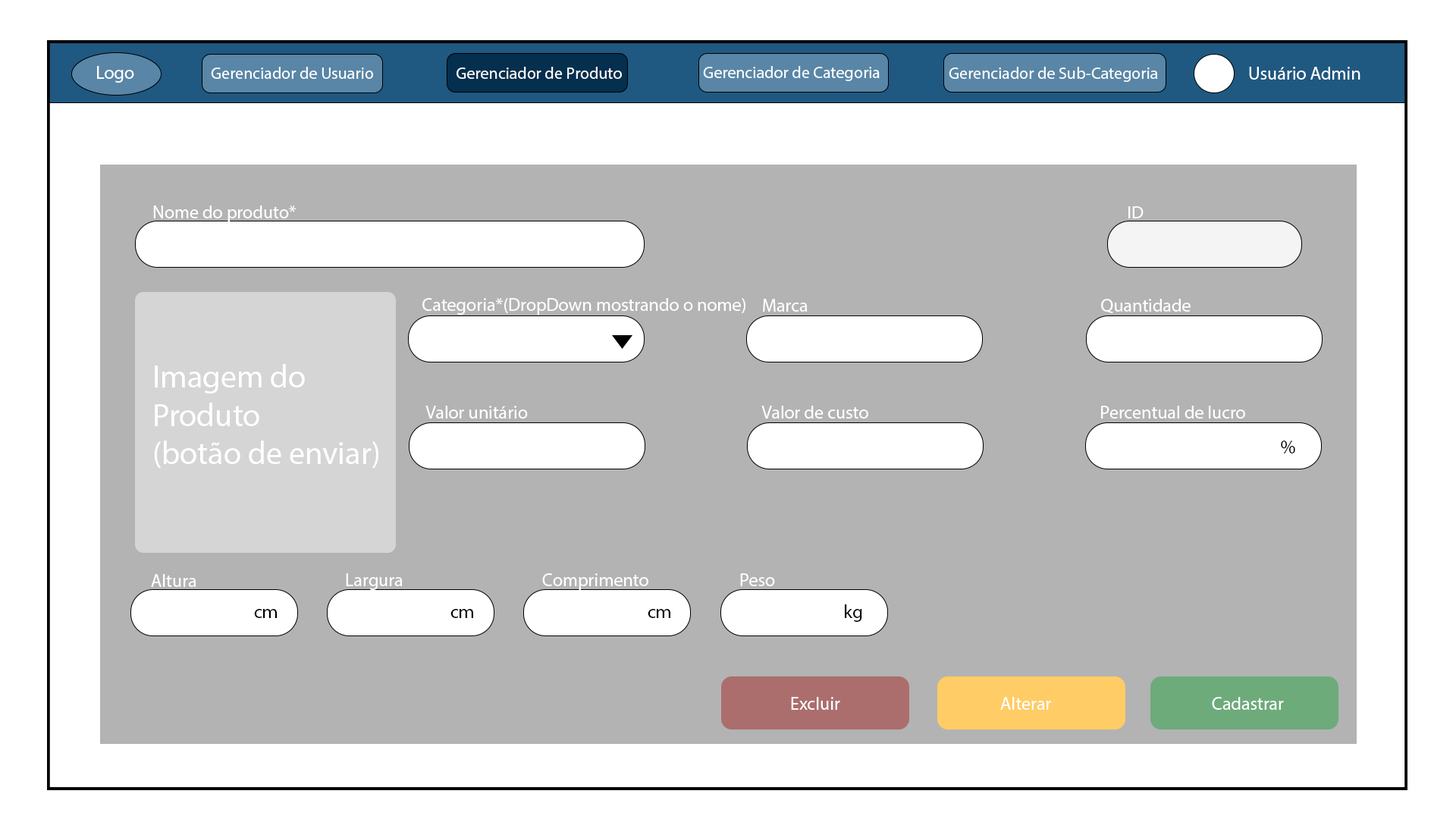
<style>
.page{position:relative;width:1456px;height:819px;background:#b3b3b3}
.page>*{position:absolute;margin:0}
.t1{font:18.2px "MyriadPro-Regular";color:#ffffff}
.t2{font:16.6px "MyriadPro-Regular";color:#ffffff}
.t3{font:18.1px "MyriadPro-Regular";color:#ffffff}
.t4{font:32.1px "MyriadPro-Regular";color:#ffffff}
.t5{font:19px "MyriadPro-Regular";color:#000000}
</style>
<div class="page">
<p class="t1" style="left:97px;top:66px;width:37px;height:17px">Logo</p>
<p class="t2" style="left:703px;top:66px;width:177px;height:15px">Gerenciador de Categoria</p>
<p class="t2" style="left:211px;top:67px;width:162px;height:12px">Gerenciador de Usuario</p>
<p class="t2" style="left:457px;top:67px;width:165px;height:12px">Gerenciador de Produto</p>
<p class="t2" style="left:949px;top:67px;width:209px;height:15px">Gerenciador de Sub-Categoria</p>
<p class="t1" style="left:1249px;top:67px;width:111px;height:13px">Usuário Admin</p>
<p class="t1" style="left:153px;top:206px;width:143px;height:16px">Nome do produto*</p>
<p class="t3" style="left:1128px;top:206px;width:16px;height:12px">ID</p>
<p class="t1" style="left:422px;top:298px;width:323px;height:17px">Categoria*(DropDown mostrando o nome)</p>
<p class="t1" style="left:763px;top:299px;width:45px;height:13px">Marca</p>
<p class="t1" style="left:1101px;top:299px;width:90px;height:14px">Quantidade</p>
<p class="t4" style="left:154px;top:364px;width:224px;height:104px">Imagem do<br>Produto<br>(botão de enviar)</p>
<p class="t1" style="left:425px;top:406px;width:103px;height:13px">Valor unitário</p>
<p class="t1" style="left:761px;top:406px;width:107px;height:13px">Valor de custo</p>
<p class="t1" style="left:1101px;top:406px;width:144px;height:13px">Percentual de lucro</p>
<p class="t5" style="left:1281px;top:441px;width:14px;height:12px">%</p>
<p class="t1" style="left:151px;top:574px;width:45px;height:13px">Altura</p>
<p class="t1" style="left:346px;top:573px;width:57px;height:17px">Largura</p>
<p class="t1" style="left:542px;top:573px;width:106px;height:17px">Comprimento</p>
<p class="t1" style="left:740px;top:573px;width:35px;height:13px">Peso</p>
<p class="t5" style="left:845px;top:604px;width:17px;height:18px">kg</p>
<p class="t5" style="left:254px;top:609px;width:23px;height:9px">cm</p>
<p class="t5" style="left:450px;top:609px;width:23px;height:9px">cm</p>
<p class="t5" style="left:648px;top:609px;width:22px;height:9px">cm</p>
<p class="t1" style="left:791px;top:697px;width:49px;height:13px">Excluir</p>
<p class="t1" style="left:1000px;top:697px;width:51px;height:13px">Alterar</p>
<p class="t1" style="left:1212px;top:697px;width:72px;height:13px">Cadastrar</p>
</div>
